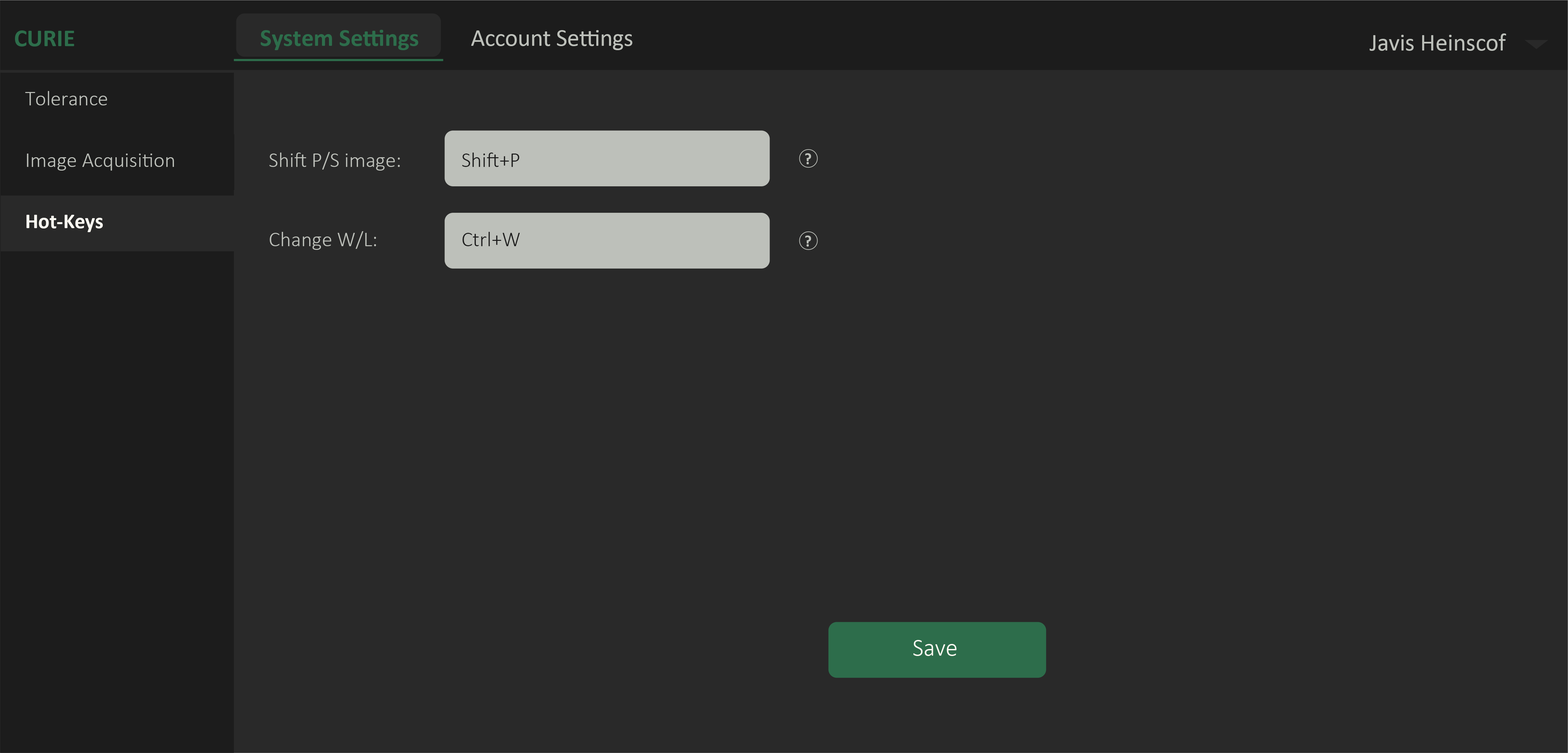
<style>
.page{position:relative;width:1568px;height:753px;background:#292929}
.page>*{position:absolute;margin:0}
.t1{font:24.4px "Calibri-Bold";color:#2d6d4b}
.t2{font:24.4px "Calibri";letter-spacing:-0.008em;color:#bdc0ba}
.t3{font:24.4px "Calibri";color:#bdc0ba}
.t4{font:24.4px "Calibri";letter-spacing:-0.016em;color:#bdc0ba}
.t5{font:24.4px "Calibri";letter-spacing:-0.007em;color:#bdc0ba}
.t6{font:20.9px "Calibri-Light";color:#bdc0ba}
.t7{font:20.9px "Calibri-Light";letter-spacing:0.004em;color:#bdc0ba}
.t8{font:20.9px "Calibri-Light";letter-spacing:0.004em;color:#1c1c1c}
.t9{font:15.7px "Calibri-Bold";color:#bdc0ba}
.t10{font:20.9px "Calibri-Bold";color:#fcfaf2}
.t11{font:24.4px "Calibri-Light";color:#fcfaf2}
</style>
<div class="page">
<p class="t1" style="left:261px;top:30px;width:157px;height:20px">System Settings</p>
<p class="t1" style="left:15px;top:30px;width:59px;height:17px">CURIE</p>
<p class="t2" style="left:471px;top:30px;width:161px;height:20px">Account Settings</p>
<p class="t3" style="left:1370px;top:33px;width:136px;height:18px">J<span class="t4">a</span>vis Heins<span class="t5">c</span>of</p>
<p class="t6" style="left:25px;top:91px;width:82px;height:14px">Tolerance</p>
<p class="t7" style="left:27px;top:154px;width:147px;height:17px">Image Acquisition</p>
<p class="t7" style="left:269px;top:152px;width:131px;height:19px">Shift P/S image:</p>
<p class="t8" style="left:462px;top:153px;width:57px;height:14px">Shift+P</p>
<p class="t9" style="left:805px;top:153px;width:6px;height:11px">?</p>
<p class="t10" style="left:26px;top:215px;width:77px;height:17px">Hot-Keys</p>
<p class="t7" style="left:270px;top:231px;width:106px;height:19px">Change W/L:</p>
<p class="t8" style="left:462px;top:232px;width:58px;height:14px">Ctrl+W</p>
<p class="t9" style="left:805px;top:236px;width:6px;height:11px">?</p>
<p class="t11" style="left:913px;top:640px;width:44px;height:16px">Save</p>
</div>
